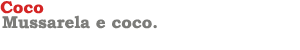
<style>
.page{position:relative;width:300px;height:50px;background:#ffffff}
.page>*{position:absolute;margin:0}
.t1{font:17px "BookmanOldStyle-Bold";color:#d42525}
.t2{font:17px "BookmanOldStyle-Bold";color:#7c7c79}
</style>
<div class="page">
<p class="t1" style="left:0px;top:1px;width:44px;height:13px">Coco</p>
<p class="t2" style="left:2px;top:15px;width:155px;height:14px">Mussarela e coco.</p>
</div>
